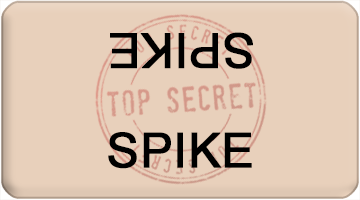
<style>
.page{position:relative;width:360px;height:200px;background:#e8d0bb}
.page>*{position:absolute;margin:0}
.t1{font:48px "ArialMT";color:#000000;font-weight:bold}
</style>
<div class="page">
<p class="t1" style="left:110px;top:32px;width:143px;height:37px;rotate:180deg">SPIKE</p>
<p class="t1" style="left:108px;top:132px;width:144px;height:37px">SPIKE</p>
</div>
